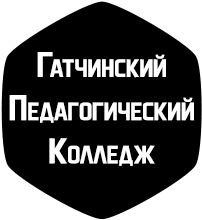
<style>
.page{position:relative;width:202px;height:220px;background:#000000}
.page>*{position:absolute;margin:0}
.t1{font:36px "AeroMaticsBold";color:#ffffff;font-variant:small-caps}
</style>
<div class="page">
<p class="t1" style="left:9px;top:52px;width:185px;height:114px;text-align:center">Гатчинский<br>Педагогический<br>Колледж</p>
</div>
